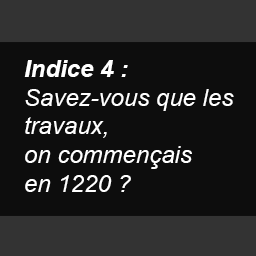
<style>
.page{position:relative;width:256px;height:256px;background:#0d0d0d}
.page>*{position:absolute;margin:0}
.t1{font:24px "Arial-ItalicMT";color:#ffffff}
.t2{font:24px "Arial-BoldItalicMT";color:#ffffff}
</style>
<div class="page">
<p class="t1" style="left:24px;top:60px;width:210px;height:132px"><span class="t2">Indice 4 :<br></span>Savez-vous que les<br>travaux,<br>on commençais<br>en 1220 ?</p>
</div>
